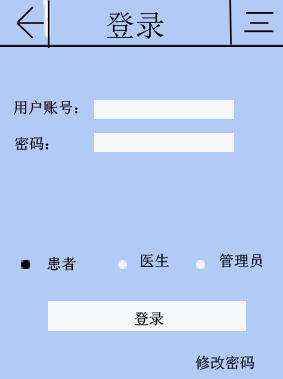
<style>
.page{position:relative;width:283px;height:379px;background:#b2caf6}
.page>*{position:absolute;margin:0}
.t1{font:30.1px "SimSun";color:#000000}
.t2{font:15px "SimSun";color:#000000}
.t3{font:15px "SimSun";color:#000103}
</style>
<div class="page">
<p class="t1" style="left:106px;top:11px;width:58px;height:28px">登录</p>
<p class="t2" style="left:13px;top:100px;width:65px;height:15px">用户账号：</p>
<p class="t2" style="left:15px;top:136px;width:34px;height:15px">密码：</p>
<p class="t3" style="left:47px;top:256px;width:29px;height:15px">患者</p>
<p class="t3" style="left:140px;top:253px;width:29px;height:15px">医生</p>
<p class="t3" style="left:220px;top:253px;width:42px;height:15px">管理员</p>
<p class="t3" style="left:135px;top:312px;width:29px;height:14px">登录</p>
<p class="t3" style="left:195px;top:355px;width:60px;height:15px">修改密码</p>
</div>
